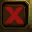
<style>
.page{position:relative;width:32px;height:32px}
.page>*{position:absolute;margin:0}
.t1{font:22.4px "28DaysLater";letter-spacing:-0.02em;color:#9a1210;scale:1.3 1}
</style>
<div class="page">
<p class="t1" style="left:5px;top:6px;width:19px;height:18px">X</p>
</div>
